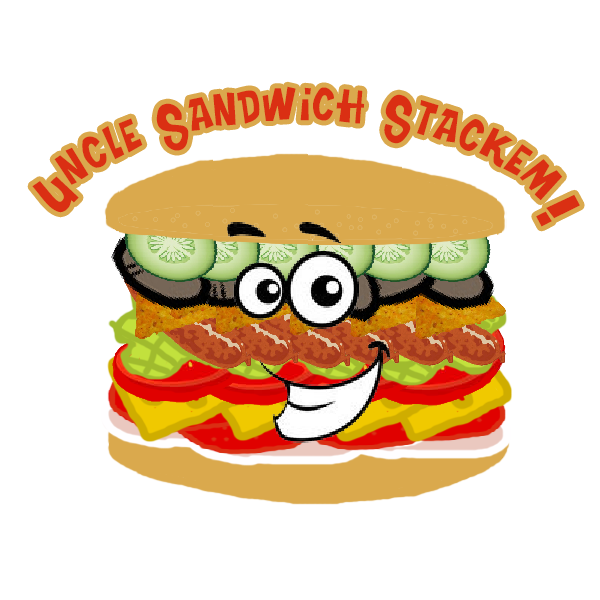
<style>
.page{position:relative;width:600px;height:600px;background:#ffffff}
.page>*{position:absolute;margin:0}
.t1{font:60px "TurkeySandwich";color:#da2f13}
</style>
<div class="page">
<p class="t1" style="left:32px;top:86px;width:548px;height:141px">Uncle Sandwich Stackem!</p>
</div>
